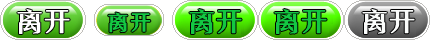
<style>
.page{position:relative;width:430px;height:40px}
.page>*{position:absolute;margin:0}
.t1{font:24.9px "FZYTK--GBK1-0";color:#ffffff;font-weight:bold;scale:1.42 1}
.t2{font:19.6px "FZYTK--GBK1-0";color:#13c842;font-weight:bold;scale:1.42 1}
.t3{font:24.9px "FZYTK--GBK1-0";color:#13c842;font-weight:bold;scale:1.42 1}
.t4{font:24.9px "FZYTK--GBK1-0";color:#fafcfb;font-weight:bold;scale:1.42 1}
</style>
<div class="page">
<p class="t1" style="left:17px;top:9px;width:25px;height:25px">离</p>
<p class="t1" style="left:44px;top:10px;width:26px;height:24px">开</p>
<p class="t2" style="left:108px;top:12px;width:20px;height:21px">离</p>
<p class="t2" style="left:130px;top:13px;width:21px;height:19px">开</p>
<p class="t3" style="left:189px;top:9px;width:25px;height:25px">离</p>
<p class="t3" style="left:216px;top:10px;width:26px;height:24px">开</p>
<p class="t3" style="left:274px;top:9px;width:25px;height:25px">离</p>
<p class="t3" style="left:301px;top:10px;width:26px;height:24px">开</p>
<p class="t4" style="left:362px;top:9px;width:25px;height:25px">离</p>
<p class="t4" style="left:389px;top:10px;width:26px;height:24px">开</p>
</div>
